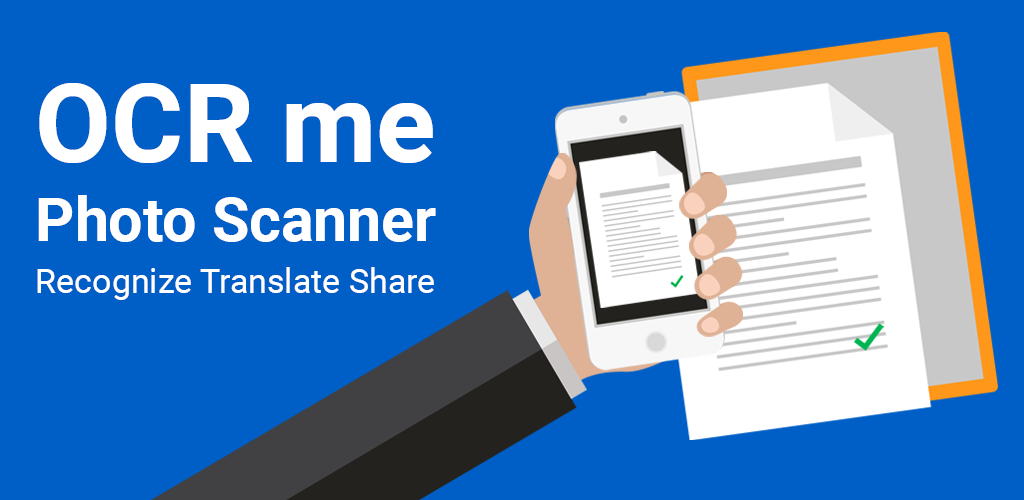
<style>
.page{position:relative;width:1024px;height:500px;background:#005fc6}
.page>*{position:absolute;margin:0}
.t1{font:60.6px/79.2px "Roboto-Bold";color:#ffffff}
.t2{font:110.1px/79.2px "Roboto-Bold";color:#ffffff}
.t3{font:34px "Roboto-Regular";color:#ffffff}
</style>
<div class="page">
<p class="t1" style="left:38px;top:83px;width:398px;height:159px"><span class="t2">OCR me <br></span>Photo Scanner</p>
<p class="t3" style="left:37px;top:267px;width:397px;height:33px">Recognize Translate Share</p>
</div>
